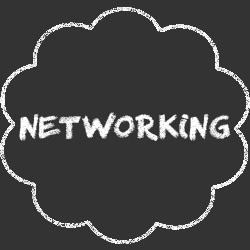
<style>
.page{position:relative;width:250px;height:250px;background:#333333}
.page>*{position:absolute;margin:0}
.t1{font:26.7px "RightChalk";color:#ffffff}
</style>
<div class="page">
<p class="t1" style="left:19px;top:112px;width:212px;height:29px">NETWORKING</p>
</div>
